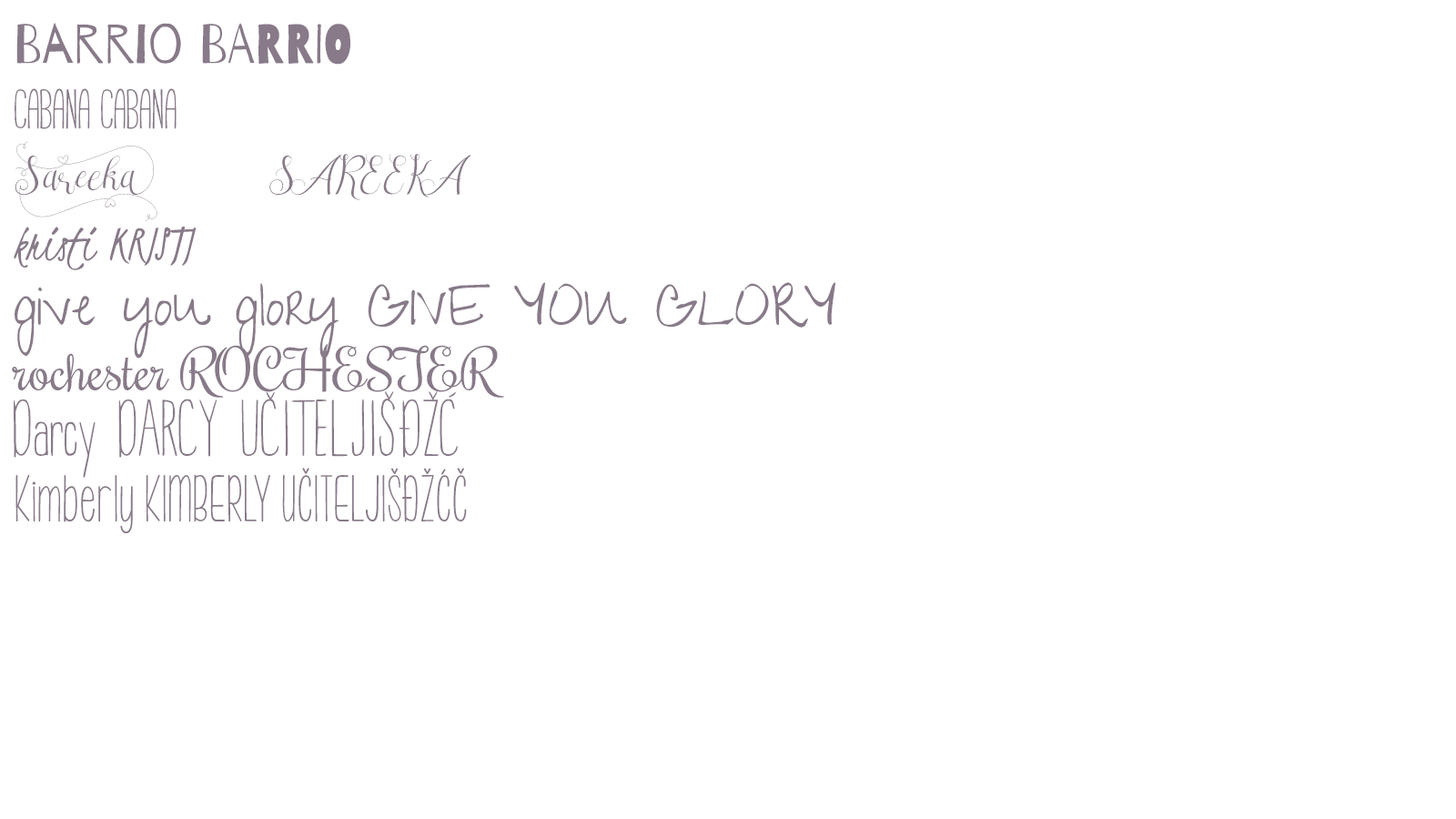
<style>
.page{position:relative;width:1456px;height:819px;background:#ffffff}
.page>*{position:absolute;margin:0}
.t1{font:54.6px "KGCallMeMaybe";color:#887a89}
.t2{font:54.6px "Barrio-Regular";color:#887a89}
.t3{font:54.6px "Cabana-Regular";color:#887a89}
.t4{font:54.6px "SareekaFree";color:#887a89}
.t5{font:54.6px "Kristi";color:#887a89}
.t6{font:54.6px "GiveYouGlory";color:#887a89}
.t7{font:54.6px "Rochester-Regular";color:#887a89}
.t8{font:54.6px "DJBBeanPole";color:#887a89}
</style>
<div class="page">
<p class="t1" style="left:12px;top:23px;width:823px;height:510px"><span class="t2">Barrio BARRIO<br></span><span class="t3">cABANA cabana <br></span><span class="t4">Sareeka SAREEKA<br></span><span class="t5">kristi KRISTI<br></span><span class="t6">give you glory GIVE YOU GLORY<br></span><span class="t7">rochester ROCHESTER<br></span><span class="t8">Darcy DARCY UČITELJIŠĐŽĆ<br></span>Kimberly KIMBERLY UČITELJIŠĐŽĆČ</p>
</div>
